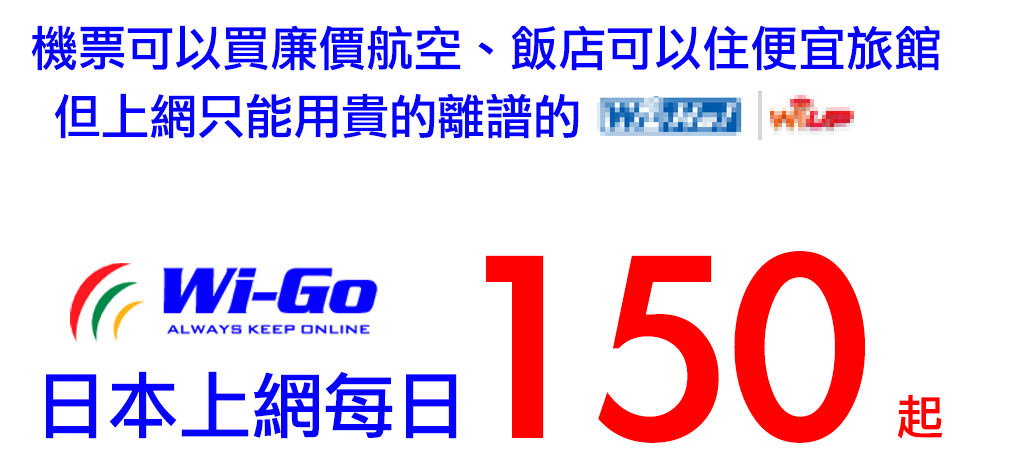
<style>
.page{position:relative;width:1030px;height:470px;background:#ffffff}
.page>*{position:absolute;margin:0}
.t1{font:48px "LiGothicMed";color:#0500ff}
.t2{font:300px "LiGothicMed";color:#ff0000}
.t3{font:72px "LiGothicMed";color:#0500ff}
.t4{font:48px "LiGothicMed";color:#ff0000}
</style>
<div class="page">
<p class="t1" style="left:31px;top:25px;width:909px;height:46px">機票可以買廉價航空、飯店可以住便宜旅館</p>
<p class="t1" style="left:54px;top:93px;width:525px;height:46px">但上網只能用貴的離譜的</p>
<p class="t2" style="left:486px;top:251px;width:379px;height:192px">150</p>
<p class="t3" style="left:46px;top:371px;width:411px;height:68px">日本上網每日</p>
<p class="t4" style="left:897px;top:395px;width:46px;height:44px">起</p>
</div>
